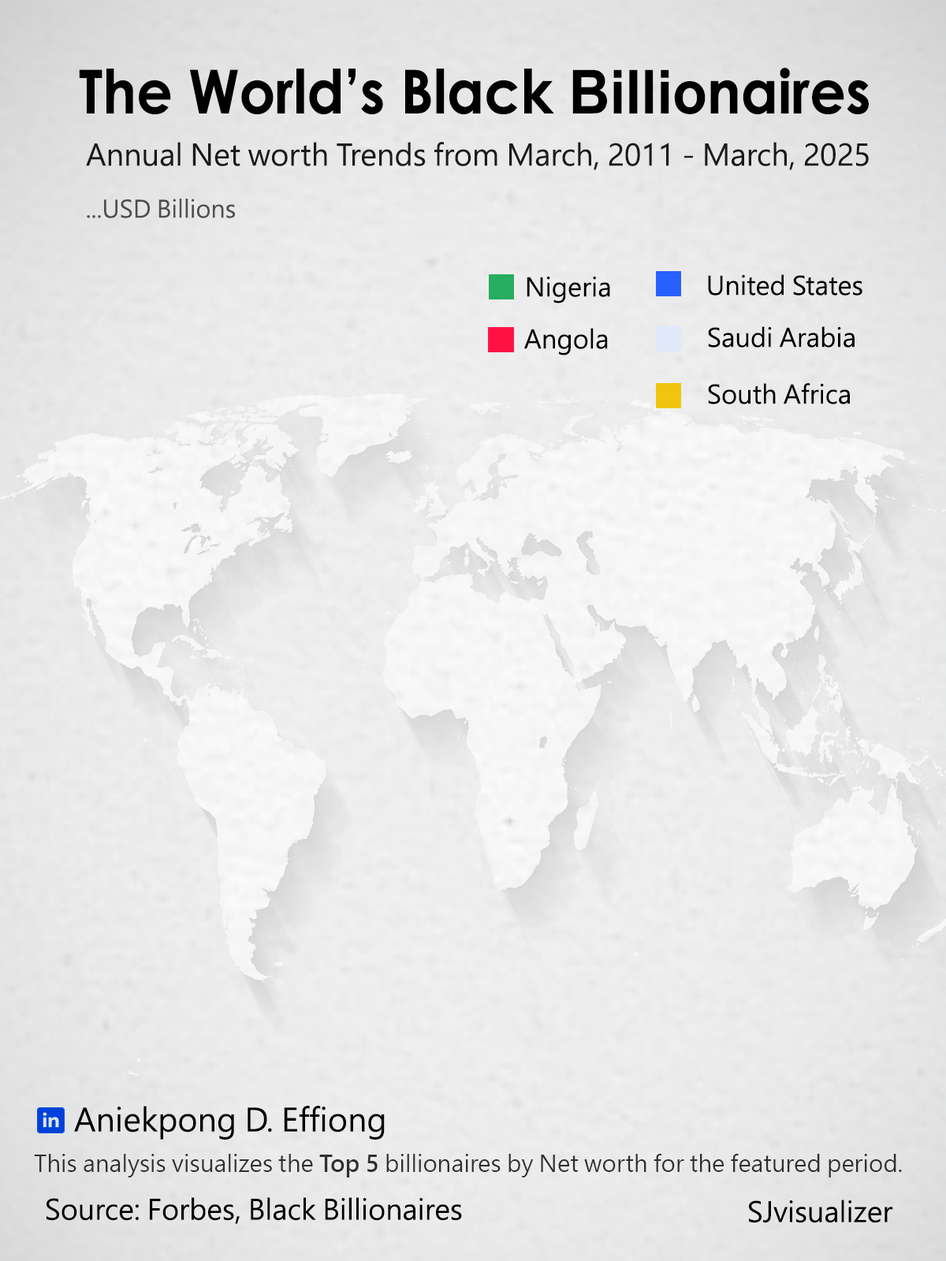
<style>
.page{position:relative;width:946px;height:1261px}
.page>*{position:absolute;margin:0}
.t1{font:60.7px "CenturyGothic-Bold";color:#000000;scale:0.93 1}
.t2{font:60.7px "Arial-BoldMT";color:#000000;scale:0.93 1}
.t3{font:29.2px "MicrosoftJhengHeiUIRegular";color:#1a1b1b}
.t4{font:23.6px "MicrosoftJhengHeiUIRegular";color:#4e4e4f}
.t5{font:25.2px "MicrosoftJhengHeiUIRegular";color:#000000}
.t6{font:31.5px "MicrosoftJhengHeiUIRegular";color:#000000}
.t7{font:22.9px "MicrosoftJhengHeiUIRegular";color:#2f2f2f}
.t8{font:22.9px "MicrosoftJhengHeiUIBold";color:#2f2f2f}
.t9{font:27.6px "MicrosoftJhengHeiUIRegular";color:#000000}
</style>
<div class="page">
<p class="t1" style="left:79px;top:68px;width:789px;height:46px">The World’s Black <span class="t2">Billio</span>naires</p>
<p class="t3" style="left:86px;top:142px;width:782px;height:28px">Annual Net worth Trends from March, 2011 - March, 2025</p>
<p class="t4" style="left:87px;top:199px;width:148px;height:19px">...USD Billions</p>
<p class="t5" style="left:526px;top:276px;width:84px;height:27px">Nigeria</p>
<p class="t5" style="left:708px;top:274px;width:154px;height:22px">United States</p>
<p class="t5" style="left:524px;top:328px;width:84px;height:27px">Angola</p>
<p class="t5" style="left:708px;top:326px;width:146px;height:22px">Saudi Arabia</p>
<p class="t5" style="left:708px;top:383px;width:142px;height:21px">South Africa</p>
<p class="t6" style="left:74px;top:1106px;width:311px;height:34px">Aniekpong D. Effiong</p>
<p class="t7" style="left:34px;top:1154px;width:868px;height:23px">This analysis visualizes the <span class="t8">Top 5</span> billionaires by Net worth for the featured period.</p>
<p class="t9" style="left:46px;top:1197px;width:416px;height:27px">Source: Forbes, Black Billionaires</p>
<p class="t9" style="left:749px;top:1199px;width:144px;height:24px">SJvisualizer</p>
</div>
